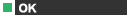
<style>
.page{position:relative;width:127px;height:15px;background:#333333}
.page>*{position:absolute;margin:0}
.t1{font:12px "Arial-BoldMT";color:#ffffff}
</style>
<div class="page">
<p class="t1" style="left:19px;top:3px;width:18px;height:10px">OK</p>
</div>
